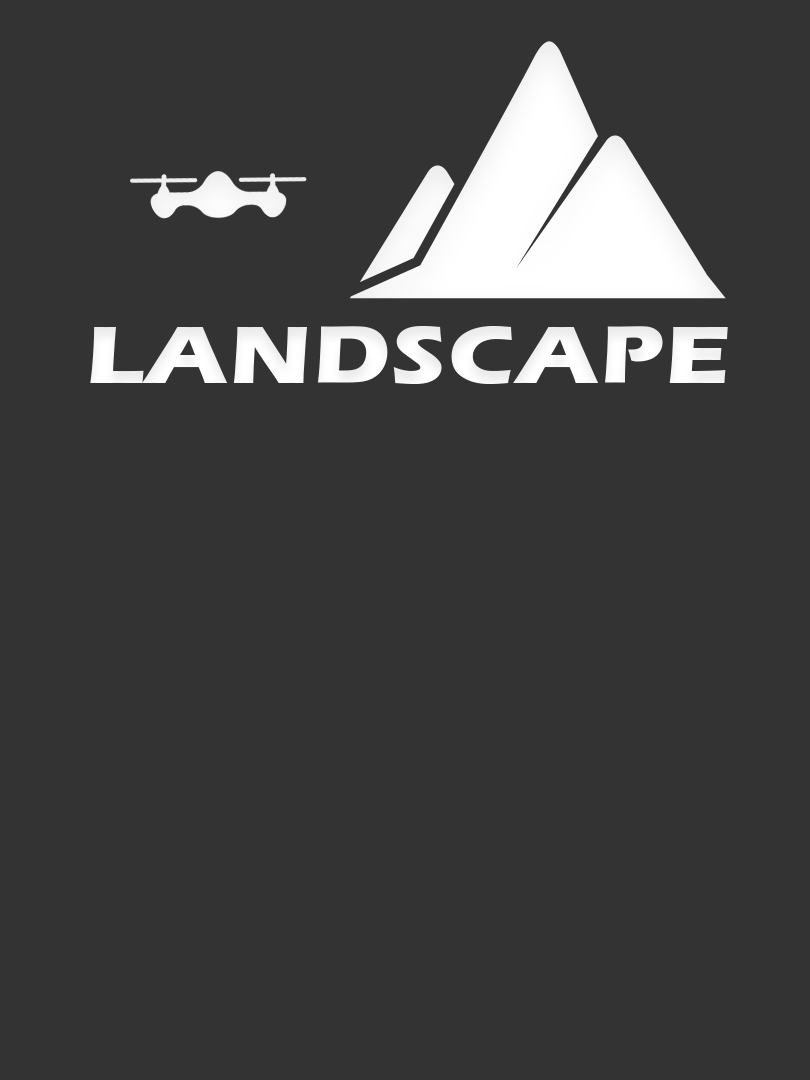
<style>
.page{position:relative;width:810px;height:1080px;background:#333333}
.page>*{position:absolute;margin:0}
.t1{font:84px "ErasITC-Bold";letter-spacing:0.015em;color:#ffffff;scale:1.19 1}
</style>
<div class="page">
<p class="t1" style="left:90px;top:326px;width:638px;height:58px">LANDSCAPE</p>
</div>
